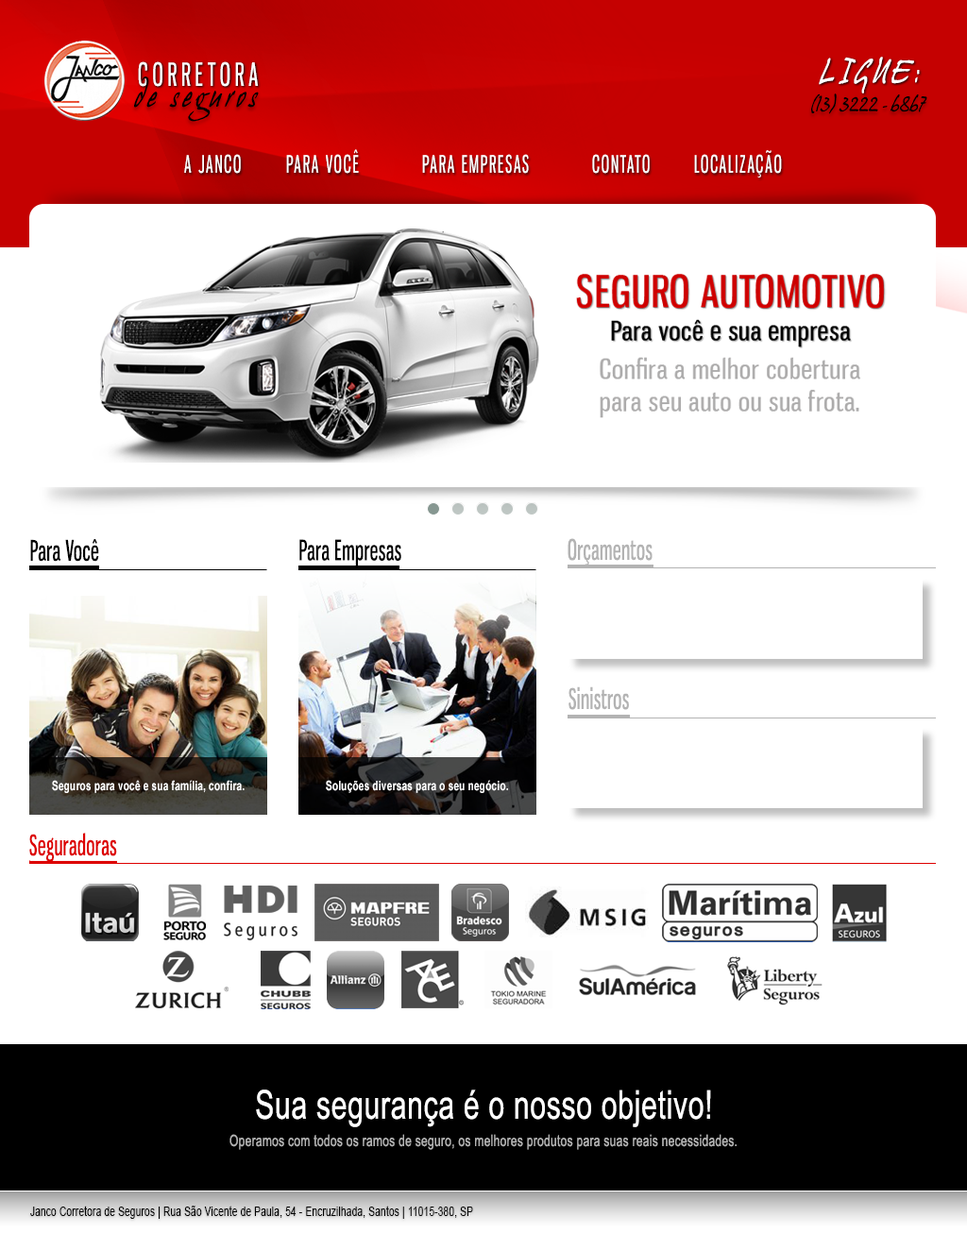
<style>
.page{position:relative;width:967px;height:1233px;background:#ffffff}
.page>*{position:absolute;margin:0}
.t1{font:31.7px "GnuolaneRg-Regular";letter-spacing:0.2em;color:#ffffff;scale:0.71 1}
.t2{font:30.4px "HansHand";letter-spacing:0.2em;color:#ffffff;scale:0.71 1}
.t3{font:30.4px "HansHand";letter-spacing:0.2em;color:#000000;scale:0.71 1}
.t4{font:18.5px "HansHand";letter-spacing:0.01em;color:#000000;scale:0.71 1}
.t5{font:18.5px "HansHand";letter-spacing:0.2em;color:#000000;scale:0.71 1}
.t6{font:23.8px "GnuolaneRg-Regular";letter-spacing:0.1em;color:#ffffff;scale:0.71 1}
.t7{font:27.8px "GnuolaneRg-Regular";letter-spacing:0.025em;color:#000000;scale:0.71 1}
.t8{font:27.8px "GnuolaneRg-Regular";letter-spacing:0.025em;color:#b3b3b3;scale:0.71 1}
.t9{font:13.2px "Arial-BoldMT";letter-spacing:0.025em;color:#ffffff;scale:0.71 1}
.t10{font:27.8px "GnuolaneRg-Regular";letter-spacing:0.025em;color:#dd0000;scale:0.71 1}
.t11{font:39.7px "ArialMT";letter-spacing:0.025em;color:#ffffff;scale:0.71 1}
.t12{font:15.9px "ArialMT";letter-spacing:0.025em;color:#b3b3b3;scale:0.71 1}
.t13{font:13.2px "ArialMT";letter-spacing:0.025em;color:#000000;scale:0.71 1}
</style>
<div class="page">
<p class="t1" style="left:138px;top:61px;width:121px;height:26px">CORRETORA</p>
<p class="t2" style="left:819px;top:57px;width:101px;height:36px">LIGUE:</p>
<p class="t3" style="left:134px;top:76px;width:125px;height:46px">de seguros</p>
<p class="t4" style="left:811px;top:93px;width:116px;height:21px"><span class="t5"> </span>(13) 3222 - 6867</p>
<p class="t6" style="left:184px;top:149px;width:598px;height:29px">A JANCO  PARA VOCÊ  PARA EMPRESAS  CONTATO  LOCALIZAÇÃO</p>
<p class="t7" style="left:30px;top:539px;width:69px;height:23px">Para Você</p>
<p class="t7" style="left:299px;top:539px;width:102px;height:28px">Para Empresas</p>
<p class="t8" style="left:568px;top:538px;width:84px;height:28px">Orçamentos</p>
<p class="t8" style="left:568px;top:686px;width:61px;height:24px">Sinistros</p>
<p class="t9" style="left:52px;top:780px;width:193px;height:13px">Seguros para você e sua família, confira.</p>
<p class="t9" style="left:326px;top:780px;width:182px;height:13px">Soluções diversas para o seu negócio.</p>
<p class="t10" style="left:29px;top:833px;width:88px;height:29px">Seguradoras</p>
<p class="t11" style="left:256px;top:1090px;width:455px;height:37px">Sua segurança é o nosso objetivo!</p>
<p class="t12" style="left:229px;top:1134px;width:508px;height:16px">Operamos com todos os ramos de seguro, os melhores produtos para suas reais necessidades.</p>
<p class="t13" style="left:30px;top:1206px;width:443px;height:13px">Janco Corretora de Seguros | Rua São Vicente de Paula, 54 - Encruzilhada, Santos | 11015-380, SP</p>
</div>
